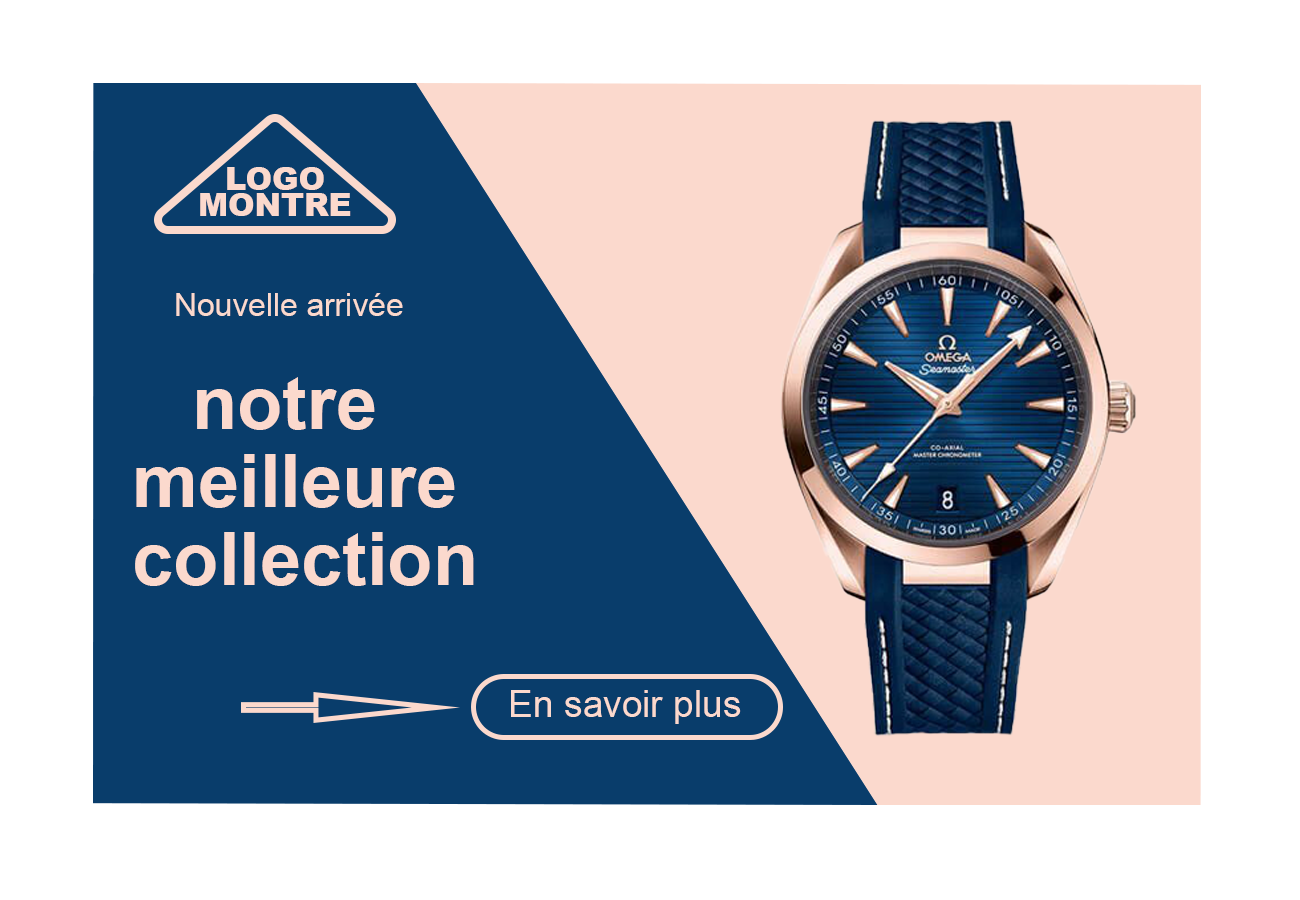
<style>
.page{position:relative;width:1300px;height:900px;background:#ffffff}
.page>*{position:absolute;margin:0}
.t1{font:31.8px/26px "Arial-Black";color:#fbd9cd}
.t2{font:31.8px "ArialMT";color:#fbd9cd}
.t3{font:74.1px/26px "Arial-BoldMT";color:#fbd9cd}
.t4{font:37px "ArialMT";color:#fbd9cd}
</style>
<div class="page">
<p class="t1" style="left:200px;top:167px;width:151px;height:49px;text-align:center">LOGO<br>MONTRE</p>
<p class="t2" style="left:176px;top:293px;width:227px;height:23px">Nouvelle arrivée</p>
<p class="t3" style="left:135px;top:377px;width:339px;height:209px;text-align:center">notre <br><br><br>meilleure<br><br><br> collection</p>
<p class="t4" style="left:511px;top:690px;width:230px;height:34px">En savoir plus</p>
</div>
